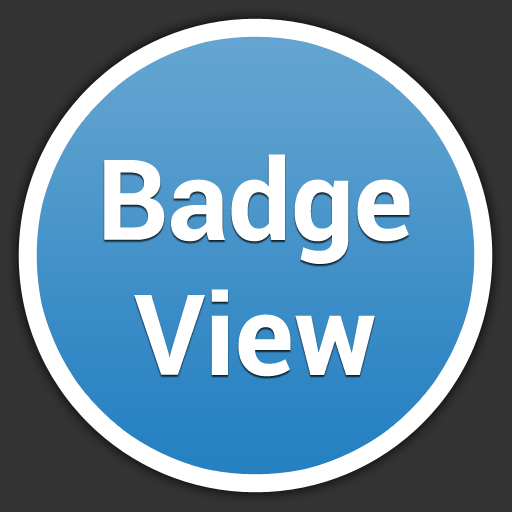
<style>
.page{position:relative;width:512px;height:512px;background:#333333}
.page>*{position:absolute;margin:0}
.t1{font:112px "Roboto-Bold";color:#ffffff}
</style>
<div class="page">
<p class="t1" style="left:104px;top:154px;width:306px;height:223px;text-align:center">Badge<br>View</p>
</div>
